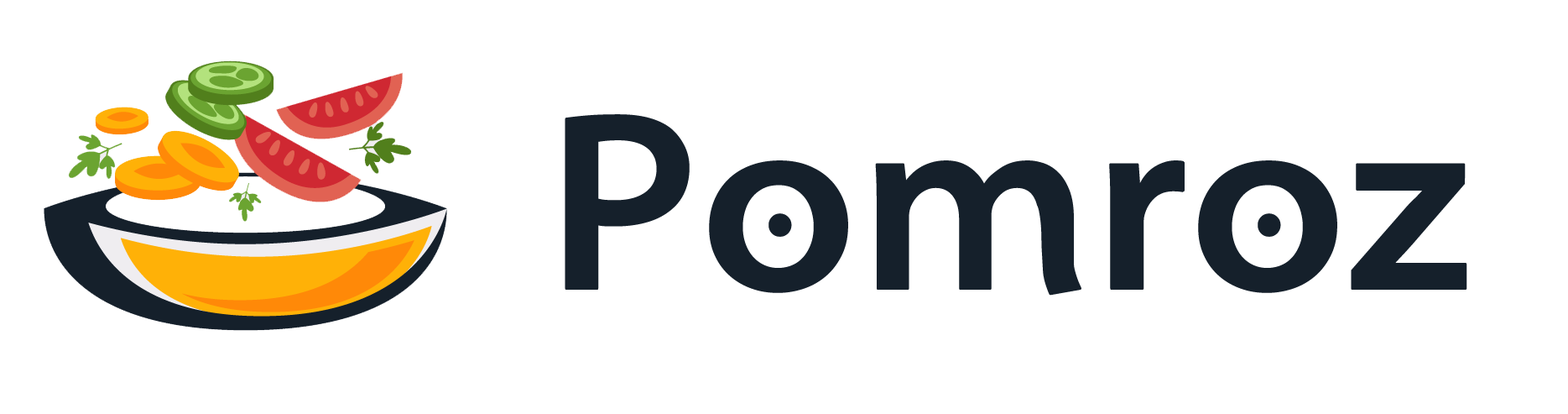
<style>
.page{position:relative;width:1568px;height:414px;background:#ffffff}
.page>*{position:absolute;margin:0}
.t1{font:257.6px "Santana-Bold";color:#15202b}
</style>
<div class="page">
<p class="t1" style="left:565px;top:114px;width:902px;height:181px">Pomroz</p>
</div>
